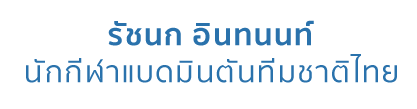
<style>
.page{position:relative;width:417px;height:109px;background:#ffffff}
.page>*{position:absolute;margin:0}
.t1{font:30.4px "SukhumvitSet-Bold";letter-spacing:0.04em;color:#2a72ac}
.t2{font:30.4px "SukhumvitSet-Text";letter-spacing:0.04em;color:#2a72ac}
</style>
<div class="page">
<p class="t1" style="left:108px;top:20px;width:206px;height:26px">รัชนก อินทนนท์</p>
<p class="t2" style="left:26px;top:54px;width:371px;height:29px">นักกีฬาแบดมินตันทีมชาติไทย</p>
</div>
